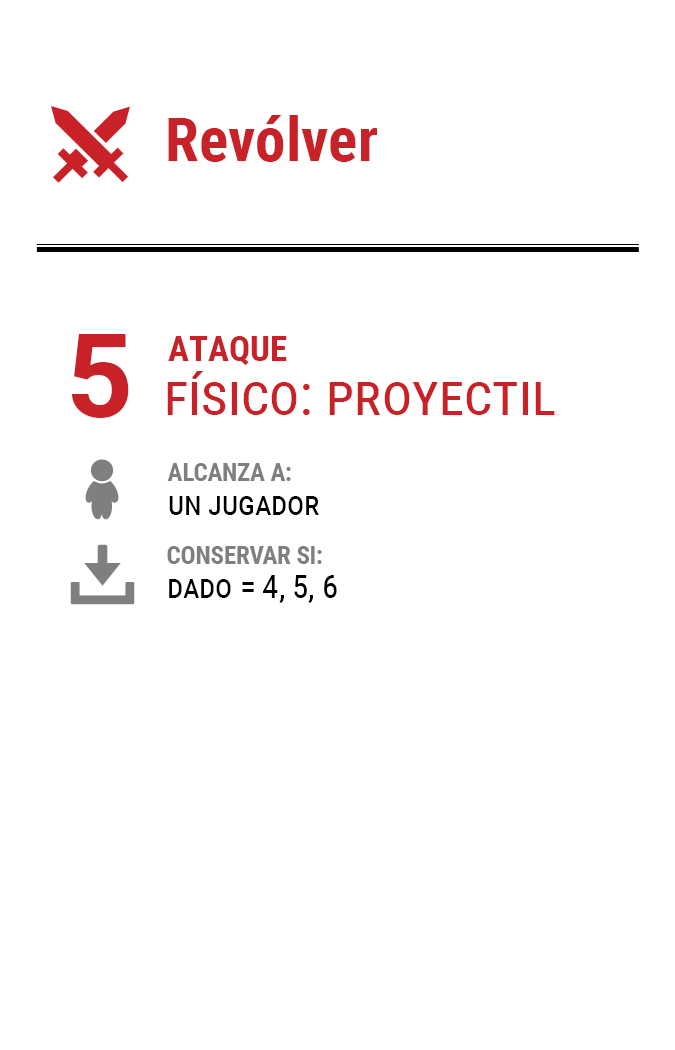
<style>
.page{position:relative;width:675px;height:1050px;background:#ffffff}
.page>*{position:absolute;margin:0}
.t1{font:61.2px "RobotoCondensed-Bold";color:#c82127}
.t2{font:116.7px "Roboto-Bold";letter-spacing:-0.16em;color:#c82127}
.t3{font:35px "RobotoCondensed-Bold";color:#c82127}
.t4{font:58.3px "RobotoCondensed-Regular";color:#c82127;font-variant:small-caps}
.t5{font:25px/33.3px "RobotoCondensed-Bold";letter-spacing:-0.01em;color:#7f7f7f}
.t6{font:33.3px/33.3px "RobotoCondensed-Regular";letter-spacing:-0.01em;color:#000000;font-variant:small-caps}
</style>
<div class="page">
<p class="t1" style="left:168px;top:115px;width:210px;height:47px">Revólver</p>
<p class="t2" style="left:72px;top:334px;width:57px;height:84px">5</p>
<p class="t3" style="left:168px;top:336px;width:119px;height:29px">ATAQUE</p>
<p class="t4" style="left:167px;top:371px;width:388px;height:44px">físico: proyectil</p>
<p class="t5" style="left:167px;top:463px;width:152px;height:52px">ALCANZA A:<br><span class="t6">un jugador</span></p>
<p class="t6" style="left:167px;top:546px;width:170px;height:57px"><span class="t5">CONSERVAR SI:<br></span>dado = 4, 5, 6</p>
</div>
